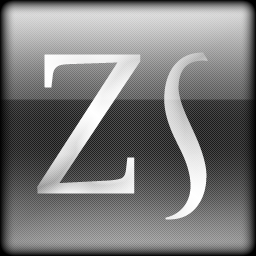
<style>
.page{position:relative;width:256px;height:256px}
.page>*{position:absolute;margin:0}
.t1{font:192px "EnvisionRoman";color:#e7e7e7;font-weight:bold}
</style>
<div class="page">
<p class="t1" style="left:37px;top:52px;width:171px;height:168px">ZS</p>
</div>
